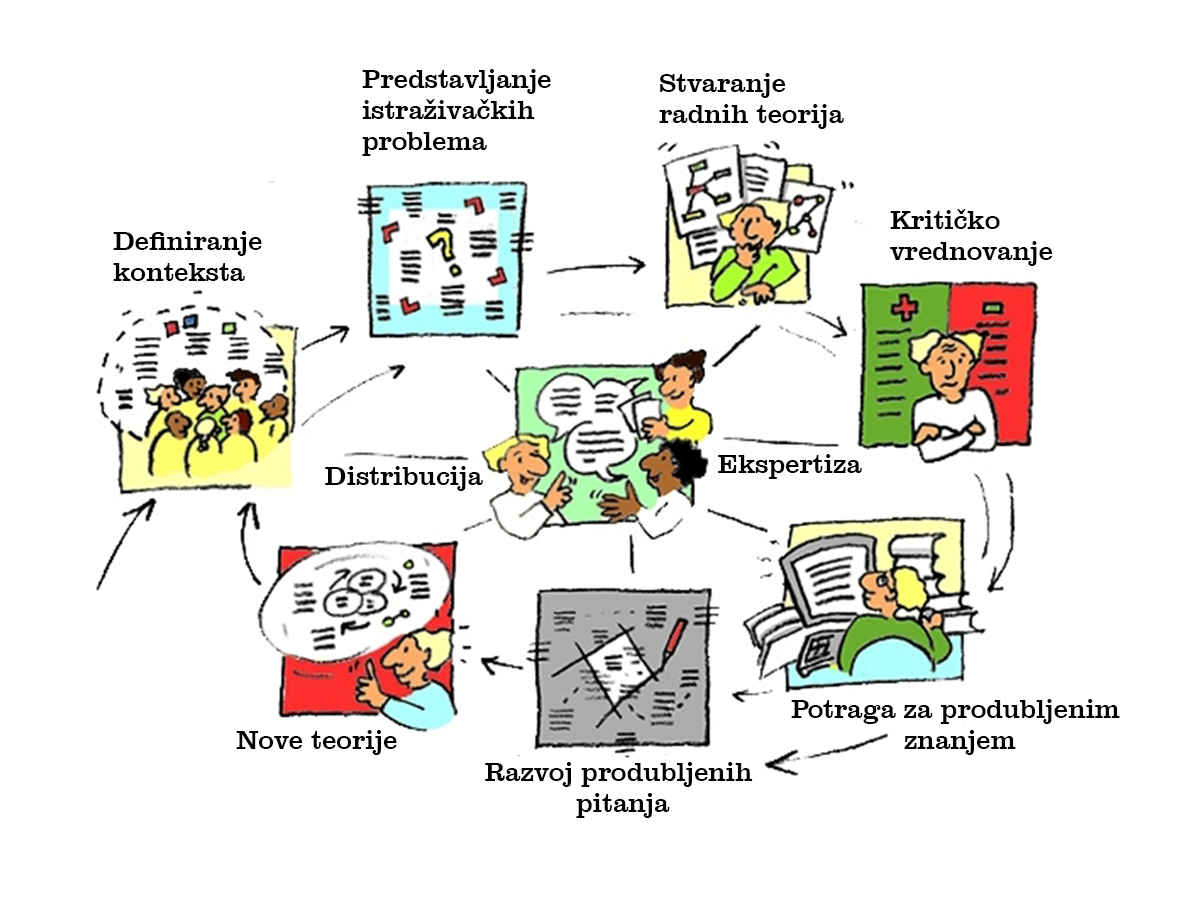
<style>
.page{position:relative;width:1181px;height:898px;background:#ffffff}
.page>*{position:absolute;margin:0}
.t1{font:27.3px/31.1px "ClarendonBT-Roman";letter-spacing:-0.01em;color:#000000}
.t2{font:27.3px "ClarendonBT-Roman";letter-spacing:-0.01em;color:#000000}
</style>
<div class="page">
<p class="t1" style="left:362px;top:69px;width:189px;height:87px">Predstavljanje <br>istraživačkih <br>problema</p>
<p class="t1" style="left:659px;top:73px;width:185px;height:56px">Stvaranje <br>radnih teorija</p>
<p class="t1" style="left:890px;top:209px;width:163px;height:57px">Kritičko <br>vrednovanje</p>
<p class="t1" style="left:113px;top:231px;width:149px;height:50px">Definiranje <br>konteksta</p>
<p class="t2" style="left:718px;top:454px;width:144px;height:25px">Ekspertiza</p>
<p class="t2" style="left:325px;top:466px;width:158px;height:25px">Distribucija</p>
<p class="t1" style="left:791px;top:699px;width:329px;height:56px;text-align:center">Potraga za produbljenim <br>znanjem</p>
<p class="t2" style="left:236px;top:730px;width:161px;height:25px">Nove teorije</p>
<p class="t1" style="left:485px;top:762px;width:268px;height:56px;text-align:center">Razvoj produbljenih <br>pitanja</p>
</div>
